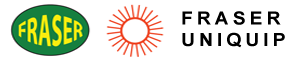
<style>
.page{position:relative;width:300px;height:61px;background:#ffffff}
.page>*{position:absolute;margin:0}
.t1{font:18px "Arial-BoldMT";letter-spacing:0.2em;color:#000000;scale:1.08 1}
</style>
<div class="page">
<p class="t1" style="left:182px;top:11px;width:103px;height:37px">FRASER<br>UNIQUIP</p>
</div>
